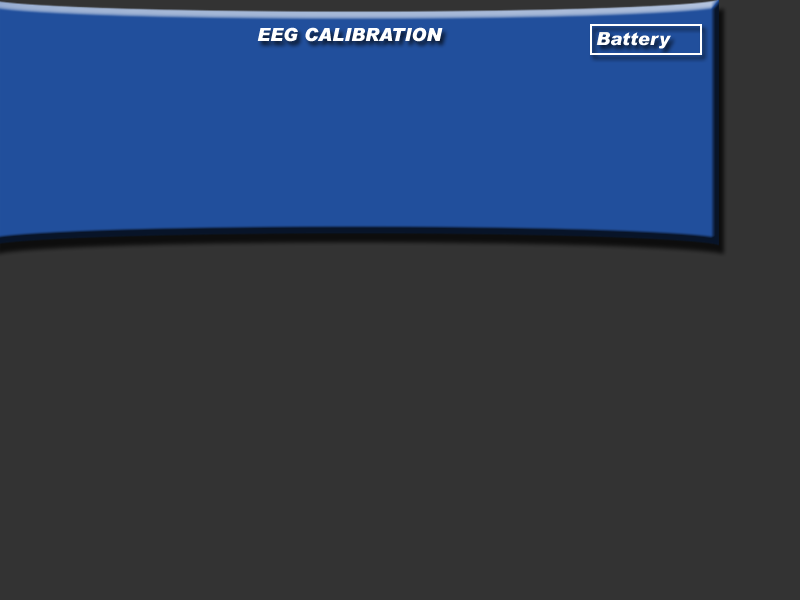
<style>
.page{position:relative;width:800px;height:600px;background:#333333}
.page>*{position:absolute;margin:0}
.t1{font:18px "Arial-BlackItalic";color:#ffffff}
</style>
<div class="page">
<p class="t1" style="left:257px;top:27px;width:186px;height:15px">EEG CALIBRATION</p>
<p class="t1" style="left:596px;top:32px;width:75px;height:17px">Battery</p>
</div>
